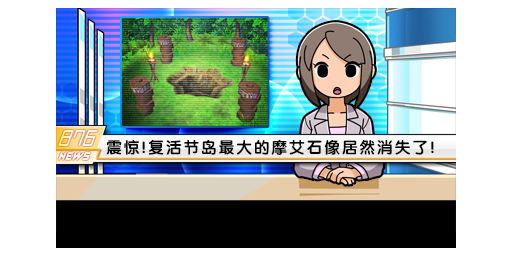
<style>
.page{position:relative;width:512px;height:256px;background:#ffffff}
.page>*{position:absolute;margin:0}
.t1{font:16px "FZY4K--GBK1-0";letter-spacing:0.1em;color:#000000}
</style>
<div class="page">
<p class="t1" style="left:106px;top:139px;width:328px;height:16px">震惊!复活节岛最大的摩艾石像居然消失了!</p>
</div>
